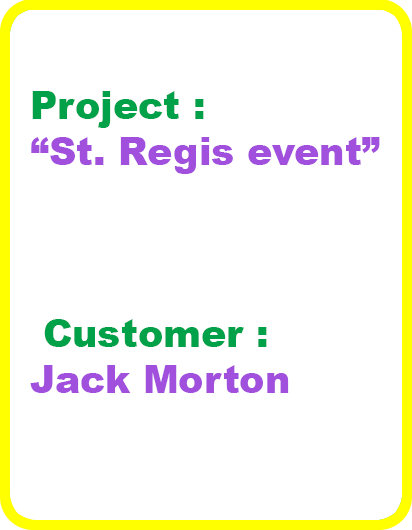
<style>
.page{position:relative;width:412px;height:530px;background:#ffffff}
.page>*{position:absolute;margin:0}
.t1{font:38px "Arial-Black";color:#a14fdd}
.t2{font:38px "Arial-Black";color:#01a149}
</style>
<div class="page">
<p class="t1" style="left:30px;top:91px;width:350px;height:302px"><span class="t2">Project :<br></span>“St. Regis event”<br><br><br><span class="t2"><br> Customer : <br></span>Jack Morton</p>
</div>
